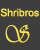
<style>
.page{position:relative;width:40px;height:50px;background:#3e3e3e}
.page>*{position:absolute;margin:0}
.t1{font:10.4px "ArialMT";color:#ffe84a}
.t2{font:25px "Vivaldii";color:#ffe84a;scale:0.86 1}
</style>
<div class="page">
<p class="t1" style="left:0px;top:8px;width:39px;height:9px">Shribros</p>
<p class="t2" style="left:5px;top:24px;width:25px;height:19px">S</p>
</div>
